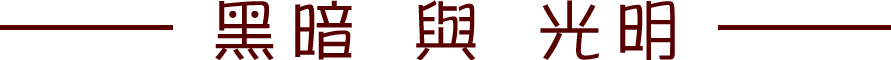
<style>
.page{position:relative;width:891px;height:60px;background:#ffffff}
.page>*{position:absolute;margin:0}
.t1{font:65px "DFPOP1-W5-WIN-BF";letter-spacing:0.2em;color:#580000}
</style>
<div class="page">
<p class="t1" style="left:215px;top:0px;width:460px;height:61px">黑暗 與 光明</p>
</div>
